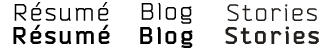
<style>
.page{position:relative;width:320px;height:48px;background:#ffffff}
.page>*{position:absolute;margin:0}
.t1{font:24px "Bender";letter-spacing:0.1em;color:#000000}
.t2{font:24px "Bender";letter-spacing:0.1em;color:#24201d}
.t3{font:24px "Bender-Bold";letter-spacing:0.1em;color:#000000}
.t4{font:24px "Bender-Bold";letter-spacing:0.1em;color:#24201d}
</style>
<div class="page">
<p class="t1" style="left:14px;top:2px;width:95px;height:19px">Résumé</p>
<p class="t1" style="left:141px;top:2px;width:51px;height:22px">Blog</p>
<p class="t2" style="left:227px;top:4px;width:90px;height:17px">Stories</p>
<p class="t3" style="left:13px;top:24px;width:97px;height:21px">Résumé</p>
<p class="t3" style="left:140px;top:26px;width:53px;height:22px">Blog</p>
<p class="t4" style="left:225px;top:26px;width:94px;height:18px">Stories</p>
</div>
